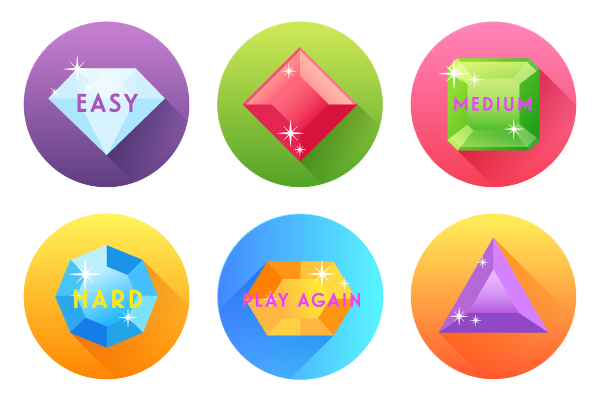
<style>
.page{position:relative;width:600px;height:397px;background:#ffffff}
.page>*{position:absolute;margin:0}
.t1{font:24px "Landmark-Inline";letter-spacing:0.1em;color:#ab53bb;font-weight:bold}
.t2{font:18px "Landmark-Inline";letter-spacing:0.1em;color:#e647e8;font-weight:bold}
.t3{font:24px "Landmark-Inline";letter-spacing:0.1em;color:#f9eb06;font-weight:bold}
</style>
<div class="page">
<p class="t1" style="left:77px;top:93px;width:61px;height:20px">EASY</p>
<p class="t2" style="left:454px;top:97px;width:78px;height:14px">MEDIUM</p>
<p class="t3" style="left:74px;top:289px;width:69px;height:19px">HARD</p>
<p class="t2" style="left:243px;top:292px;width:117px;height:15px">PLAY AGAIN</p>
</div>
